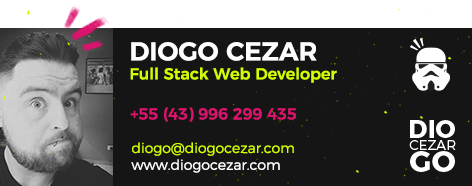
<style>
.page{position:relative;width:472px;height:186px;background:#151515}
.page>*{position:absolute;margin:0}
.t1{font:25.9px "Montserrat-SemiBold";color:#ffffff}
.t2{font:16px "Montserrat-Medium";color:#d1fe00}
.t3{font:16px "Montserrat-Medium";color:#dc136d}
.t4{font:14px "Montserrat-Light";color:#d1fe00}
.t5{font:14px "Montserrat-Light";color:#ffffff}
</style>
<div class="page">
<p class="t1" style="left:131px;top:42px;width:186px;height:19px">DIOGO CEZAR</p>
<p class="t2" style="left:130px;top:67px;width:207px;height:16px">Full Stack Web Developer</p>
<p class="t3" style="left:130px;top:107px;width:166px;height:15px">+55 (43) 996 299 435</p>
<p class="t4" style="left:131px;top:142px;width:163px;height:31px">diogo@diogocezar.com<br><span class="t5">www.diogocezar.com</span></p>
</div>
